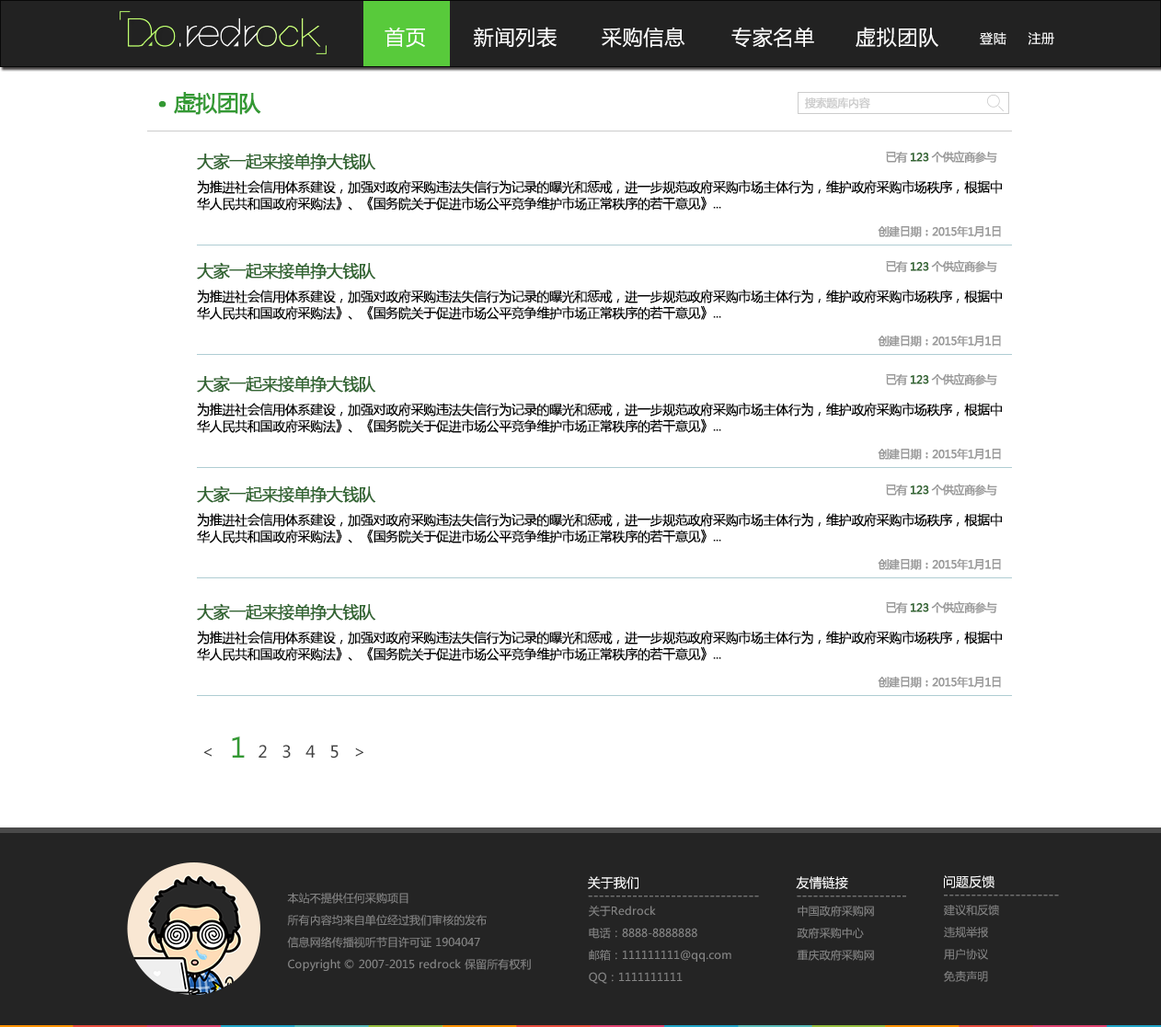
<style>
.page{position:relative;width:1161px;height:1027px;background:#ffffff}
.page>*{position:absolute;margin:0}
.t1{font:20.2px "MicrosoftYaHei";letter-spacing:0.035em;color:#ffffff}
.t2{font:12.9px "MicrosoftYaHei";letter-spacing:0.035em;color:#ffffff}
.t3{font:44.1px "MicrosoftYaHei";letter-spacing:-0.05em;color:#339933;font-weight:bold}
.t4{font:22.1px "MicrosoftYaHei";letter-spacing:-0.05em;color:#339933;font-weight:bold}
.t5{font:11px "MicrosoftYaHeiLight";letter-spacing:-0.05em;color:#cacaca;font-weight:bold}
.t6{font:16.6px "MicrosoftYaHei";letter-spacing:-0.05em;color:#336633;font-weight:bold}
.t7{font:11px "MicrosoftYaHei";letter-spacing:-0.05em;color:#999999;font-weight:bold}
.t8{font:11px "MicrosoftYaHei";letter-spacing:-0.05em;color:#336633;font-weight:bold}
.t9{font:12.9px/16.6px "MicrosoftYaHeiLight";letter-spacing:-0.05em;color:#000000;font-weight:bold}
.t10{font:16.6px "MicrosoftYaHei";color:#3f3f3f}
.t11{font:27.6px "MicrosoftYaHei";color:#339933}
.t12{font:12.9px "MicrosoftYaHei";color:#ffffff}
.t13{font:11px/22.1px "MicrosoftYaHei";color:#858585}
.t14{font:12.9px "MicrosoftYaHei";color:#858585}
</style>
<div class="page">
<p class="t1" style="left:384px;top:27px;width:41px;height:21px">首页</p>
<p class="t1" style="left:474px;top:27px;width:82px;height:21px">新闻列表</p>
<p class="t1" style="left:602px;top:27px;width:83px;height:21px">采购信息</p>
<p class="t1" style="left:731px;top:27px;width:83px;height:21px">专家名单</p>
<p class="t1" style="left:855px;top:27px;width:83px;height:21px">虚拟团队</p>
<p class="t2" style="left:980px;top:32px;width:74px;height:13px">登陆     注册</p>
<p class="t3" style="left:158px;top:101px;width:8px;height:7px">·</p>
<p class="t4" style="left:174px;top:92px;width:87px;height:23px">虚拟团队</p>
<p class="t5" style="left:804px;top:97px;width:66px;height:12px">搜索题库内容</p>
<p class="t6" style="left:197px;top:153px;width:178px;height:17px">大家一起来接单挣大钱队</p>
<p class="t7" style="left:886px;top:151px;width:111px;height:13px">已有 <span class="t8">123</span> 个供应商参与</p>
<p class="t9" style="left:197px;top:180px;width:805px;height:31px">为推进社会信用体系建设，加强对政府采购违法失信行为记录的曝光和惩戒，进一步规范政府采购市场主体行为，维护政府采购市场秩序，根据中<br>华人民共和国政府采购法》、《国务院关于促进市场公平竞争维护市场正常秩序的若干意见》...</p>
<p class="t7" style="left:877px;top:225px;width:124px;height:12px">创建日期：2015年1月1日</p>
<p class="t6" style="left:197px;top:262px;width:178px;height:18px">大家一起来接单挣大钱队</p>
<p class="t7" style="left:886px;top:260px;width:111px;height:13px">已有 <span class="t8">123</span> 个供应商参与</p>
<p class="t9" style="left:197px;top:290px;width:805px;height:30px">为推进社会信用体系建设，加强对政府采购违法失信行为记录的曝光和惩戒，进一步规范政府采购市场主体行为，维护政府采购市场秩序，根据中<br>华人民共和国政府采购法》、《国务院关于促进市场公平竞争维护市场正常秩序的若干意见》...</p>
<p class="t7" style="left:877px;top:335px;width:124px;height:12px">创建日期：2015年1月1日</p>
<p class="t6" style="left:197px;top:375px;width:178px;height:18px">大家一起来接单挣大钱队</p>
<p class="t7" style="left:886px;top:373px;width:111px;height:13px">已有 <span class="t8">123</span> 个供应商参与</p>
<p class="t9" style="left:197px;top:403px;width:805px;height:30px">为推进社会信用体系建设，加强对政府采购违法失信行为记录的曝光和惩戒，进一步规范政府采购市场主体行为，维护政府采购市场秩序，根据中<br>华人民共和国政府采购法》、《国务院关于促进市场公平竞争维护市场正常秩序的若干意见》...</p>
<p class="t7" style="left:877px;top:448px;width:124px;height:12px">创建日期：2015年1月1日</p>
<p class="t6" style="left:197px;top:486px;width:178px;height:17px">大家一起来接单挣大钱队</p>
<p class="t7" style="left:886px;top:484px;width:111px;height:13px">已有 <span class="t8">123</span> 个供应商参与</p>
<p class="t9" style="left:197px;top:513px;width:805px;height:31px">为推进社会信用体系建设，加强对政府采购违法失信行为记录的曝光和惩戒，进一步规范政府采购市场主体行为，维护政府采购市场秩序，根据中<br>华人民共和国政府采购法》、《国务院关于促进市场公平竞争维护市场正常秩序的若干意见》...</p>
<p class="t7" style="left:877px;top:558px;width:124px;height:12px">创建日期：2015年1月1日</p>
<p class="t6" style="left:197px;top:603px;width:178px;height:18px">大家一起来接单挣大钱队</p>
<p class="t7" style="left:886px;top:602px;width:111px;height:12px">已有 <span class="t8">123</span> 个供应商参与</p>
<p class="t9" style="left:197px;top:631px;width:805px;height:30px">为推进社会信用体系建设，加强对政府采购违法失信行为记录的曝光和惩戒，进一步规范政府采购市场主体行为，维护政府采购市场秩序，根据中<br>华人民共和国政府采购法》、《国务院关于促进市场公平竞争维护市场正常秩序的若干意见》...</p>
<p class="t7" style="left:877px;top:676px;width:124px;height:12px">创建日期：2015年1月1日</p>
<p class="t10" style="left:203px;top:737px;width:160px;height:22px">&lt;  <span class="t11">1   </span>2   3   4   5   &gt;</p>
<p class="t12" style="left:588px;top:877px;width:50px;height:12px">关于我们</p>
<p class="t12" style="left:796px;top:877px;width:52px;height:12px">友情链接</p>
<p class="t12" style="left:944px;top:876px;width:50px;height:12px">问题反馈</p>
<p class="t13" style="left:287px;top:893px;width:244px;height:78px">本站不提供任何采购项目<br>所有内容均来自单位经过我们审核的发布<br>信息网络传播视听节目许可证 1904047<br>Copyright © 2007-2015 redrock 保留所有权利</p>
<p class="t14" style="left:588px;top:896px;width:171px;height:2px">-------------------------------</p>
<p class="t13" style="left:589px;top:906px;width:142px;height:78px">关于Redrock<br>电话：8888-8888888<br>邮箱：111111111@qq.com<br>QQ：1111111111</p>
<p class="t14" style="left:796px;top:896px;width:110px;height:2px">--------------------</p>
<p class="t13" style="left:796px;top:906px;width:78px;height:55px">中国政府采购网<br>政府采购中心<br>重庆政府采购网</p>
<p class="t14" style="left:944px;top:895px;width:115px;height:2px">---------------------</p>
<p class="t13" style="left:944px;top:905px;width:55px;height:77px">建议和反馈<br>违规举报<br>用户协议<br>免责声明</p>
</div>
